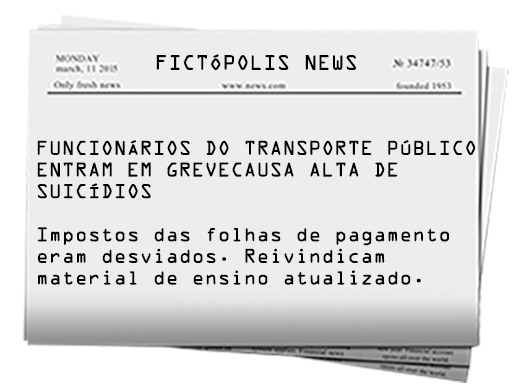
<style>
.page{position:relative;width:512px;height:387px;background:#ededed}
.page>*{position:absolute;margin:0}
.t1{font:18.8px "OCRAStd";color:#000000}
.t2{font:18px "OCRAStd";color:#000000}
</style>
<div class="page">
<p class="t1" style="left:156px;top:54px;width:200px;height:16px">FICTÓPOLIS NEWS</p>
<p class="t2" style="left:37px;top:140px;width:439px;height:145px">FUNCIONÁRIOS DO TRANSPORTE PÚBLICO<br>ENTRAM EM GREVECAUSA ALTA DE <br>SUICÍDIOS<br><br>Impostos das folhas de pagamento <br>eram desviados. Reivindicam <br>material de ensino atualizado.</p>
</div>
